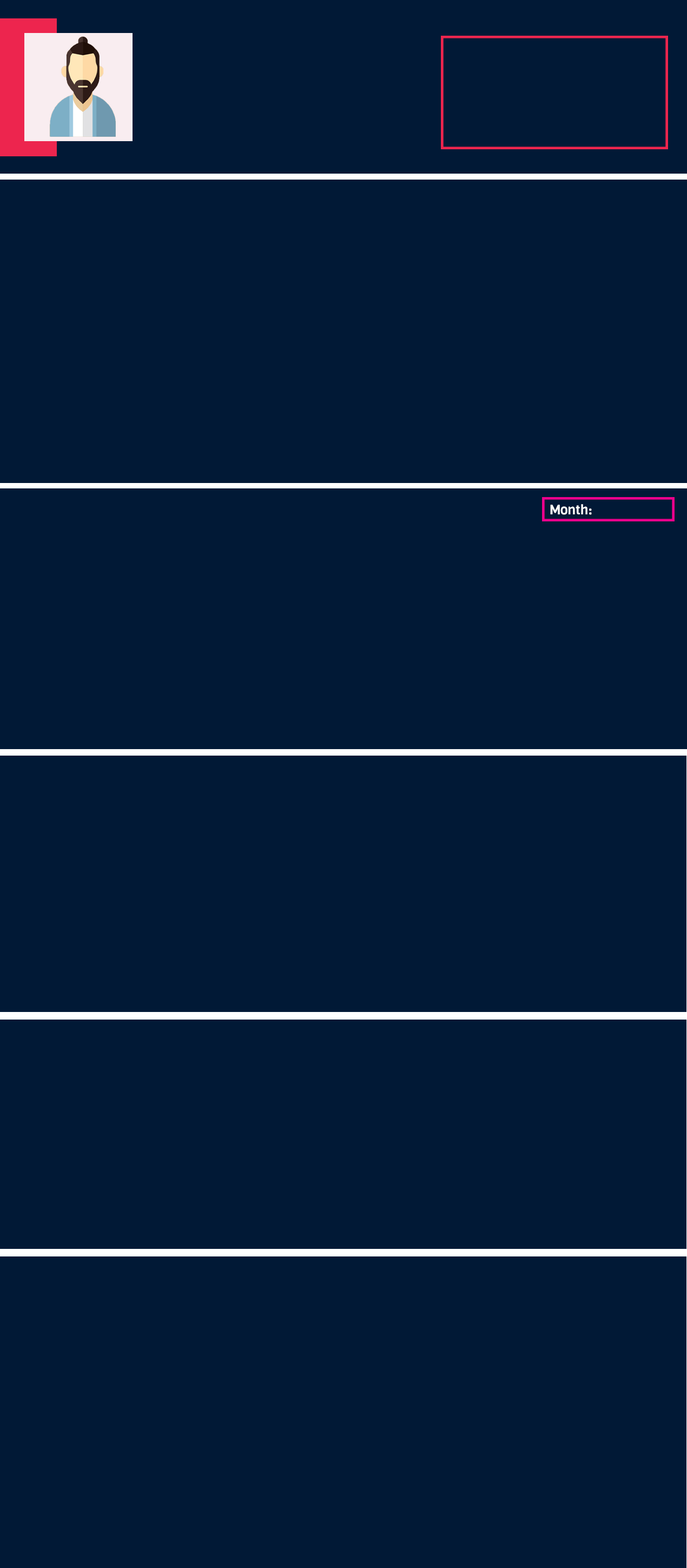
<style>
.page{position:relative;width:687px;height:1568px;background:#011936}
.page>*{position:absolute;margin:0}
.t1{font:13.5px "Viga-Regular";color:#ffffff}
</style>
<div class="page">
<p class="t1" style="left:550px;top:504px;width:42px;height:11px">Month:</p>
</div>
